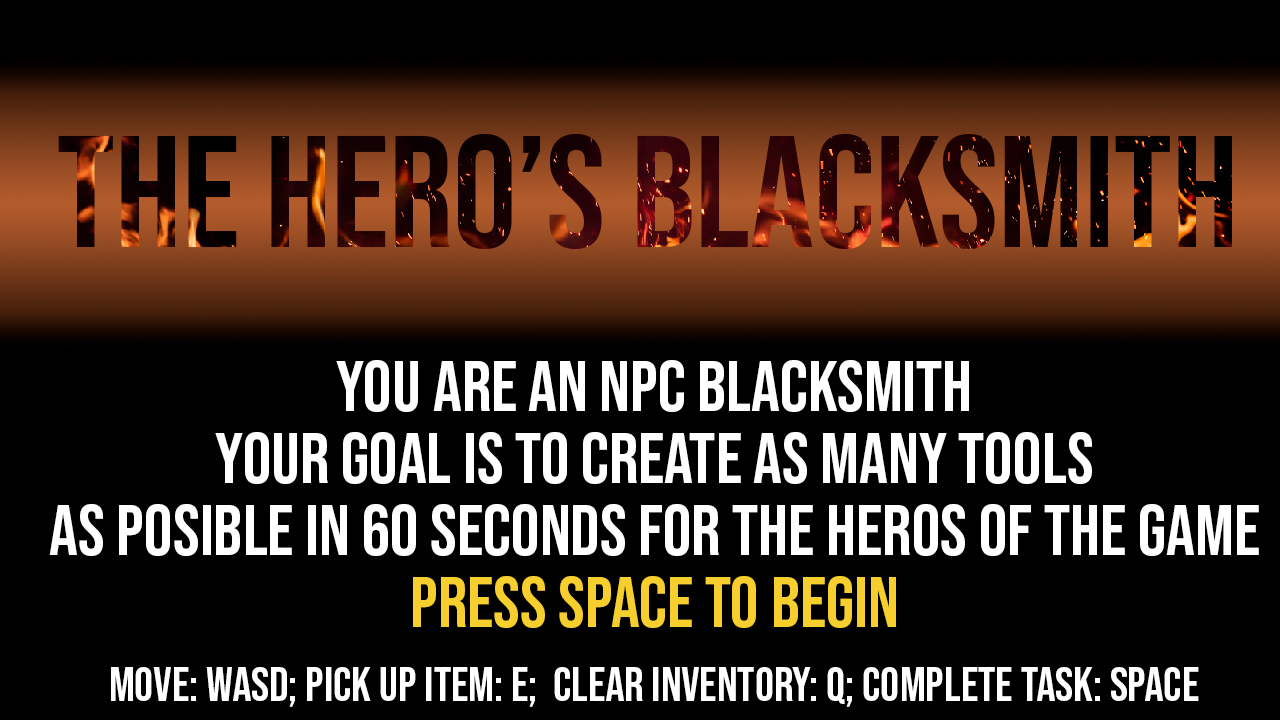
<style>
.page{position:relative;width:1280px;height:720px;background:#000000}
.page>*{position:absolute;margin:0}
.t1{font:72px/72px "BebasNeue-Regular";color:#ffffff}
.t2{font:72px/72px "BebasNeue-Regular";color:#f6ce2e}
.t3{font:48px "BebasNeue-Regular";color:#ffffff}
</style>
<div class="page">
<p class="t1" style="left:49px;top:360px;width:1210px;height:268px;text-align:center">You are an npc blacksmith<br>your goal is to create as many tools<br>as posible in 60 seconds for the heros of the game<br><span class="t2">Press Space to begin</span></p>
<p class="t3" style="left:111px;top:667px;width:1088px;height:40px">Move: WASD; Pick up Item: E;  clear Inventory: Q; Complete Task: Space</p>
</div>
